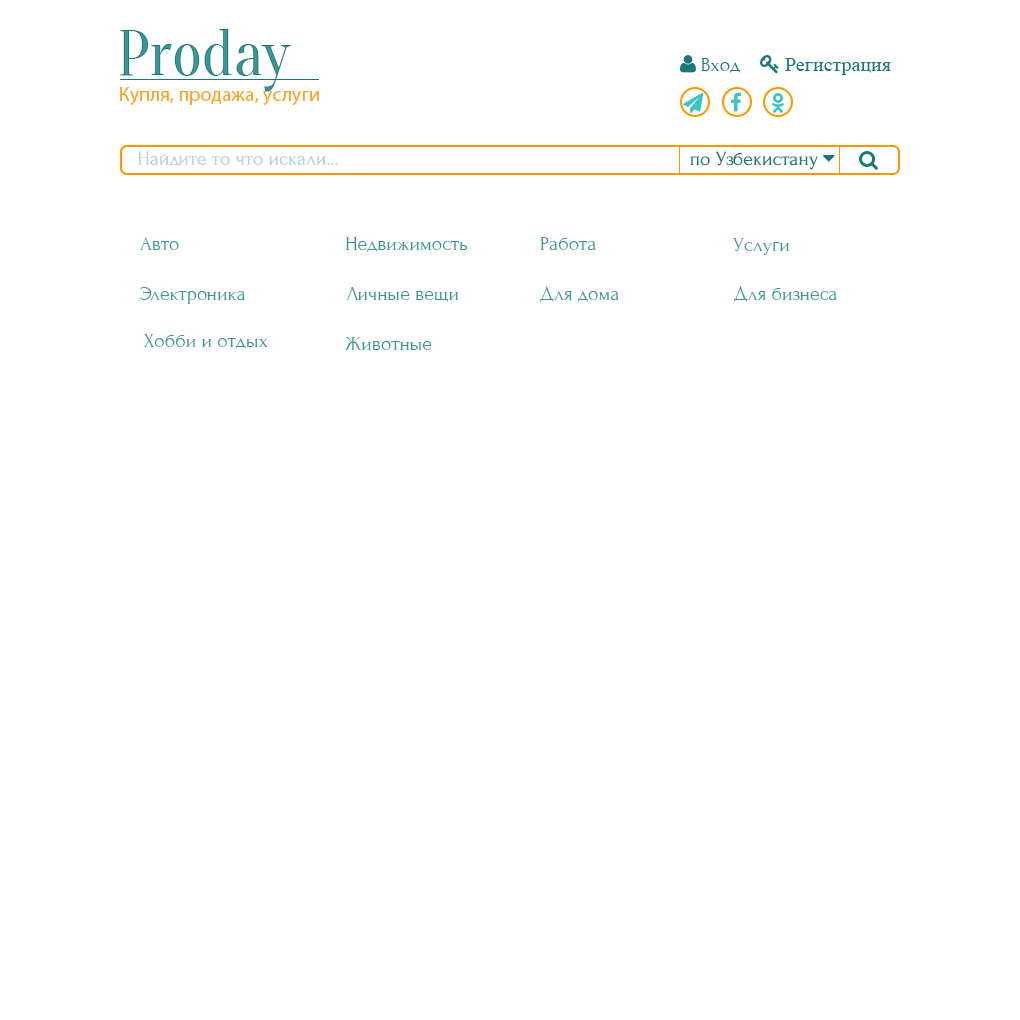
<style>
.page{position:relative;width:1020px;height:1020px;background:#ffffff}
.page>*{position:absolute;margin:0}
.t1{font:64px "Oranienbaum";color:#399798}
.t2{font:20px "MyriadPro-Regular";color:#ffa015}
.t3{font:20px "Forum";color:#b2d3d3}
.t4{font:20px "Forum";color:#399798}
</style>
<div class="page">
<p class="t1" style="left:119px;top:29px;width:172px;height:63px">Proday</p>
<p class="t2" style="left:120px;top:87px;width:199px;height:18px">Купля, продажа, услуги</p>
<p class="t3" style="left:138px;top:151px;width:200px;height:16px">Найдите то что искали...</p>
<p class="t4" style="left:140px;top:237px;width:39px;height:13px">Авто</p>
<p class="t4" style="left:346px;top:237px;width:122px;height:15px">Недвижимость</p>
<p class="t4" style="left:540px;top:237px;width:56px;height:13px">Работа</p>
<p class="t4" style="left:733px;top:238px;width:56px;height:17px">Услуги</p>
<p class="t4" style="left:140px;top:287px;width:105px;height:17px">Электроника</p>
<p class="t4" style="left:346px;top:287px;width:113px;height:15px">Личные вещи</p>
<p class="t4" style="left:540px;top:286px;width:79px;height:16px">Для дома</p>
<p class="t4" style="left:734px;top:286px;width:103px;height:16px">Для бизнеса</p>
<p class="t4" style="left:144px;top:334px;width:124px;height:15px">Хобби и отдых</p>
<p class="t4" style="left:345px;top:337px;width:87px;height:13px">Животные</p>
</div>
